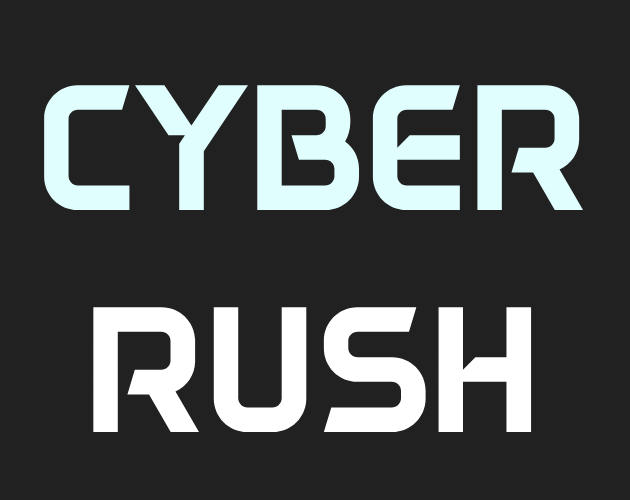
<style>
.page{position:relative;width:630px;height:500px;background:#212121}
.page>*{position:absolute;margin:0}
.t1{font:185px "DAGGERSQUARE";color:#e0fefe}
.t2{font:185px "DAGGERSQUARE";color:#ffffff}
</style>
<div class="page">
<p class="t1" style="left:44px;top:85px;width:540px;height:347px;text-align:center">CYBER<br><span class="t2">RUSH</span></p>
</div>
